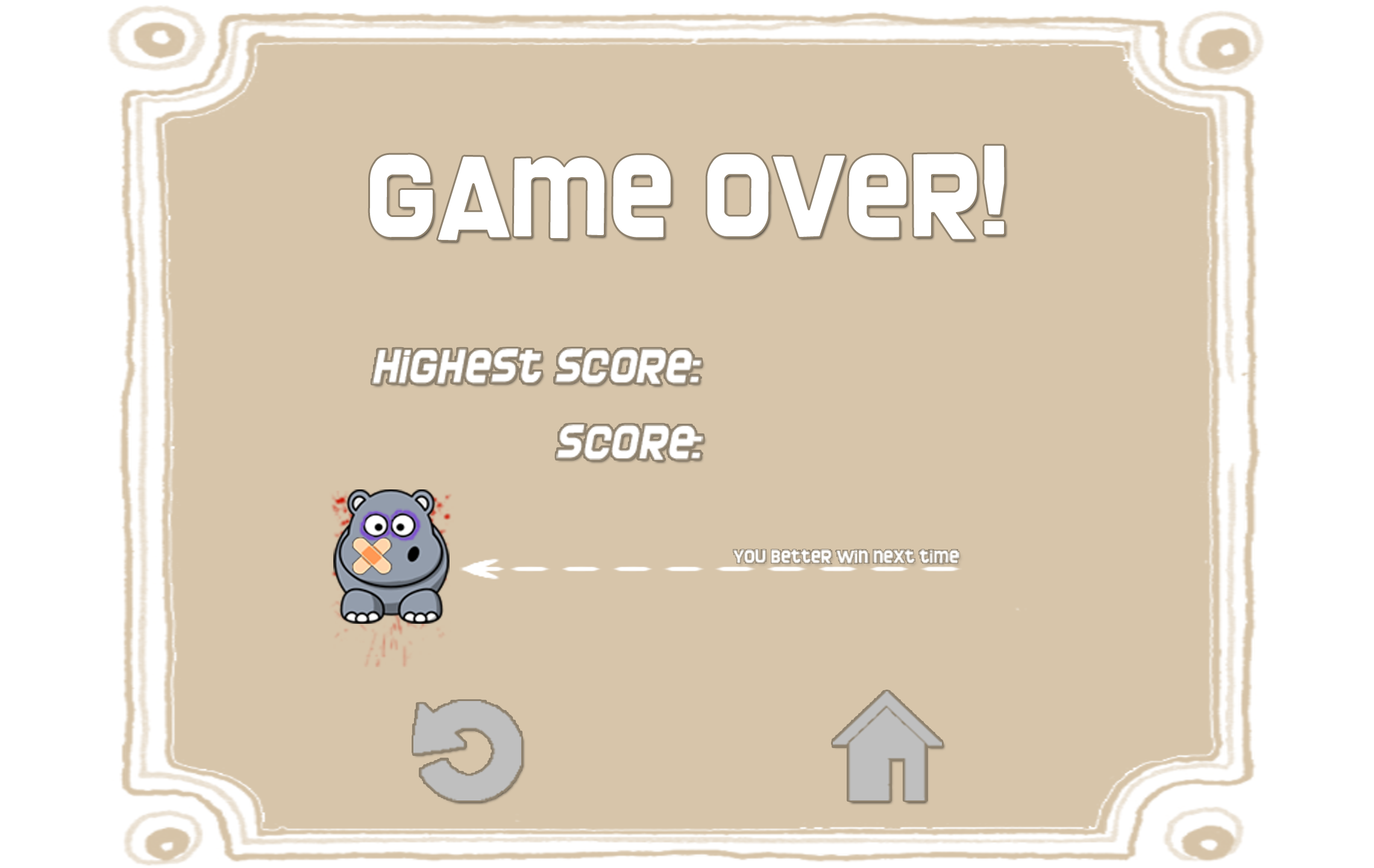
<style>
.page{position:relative;width:1374px;height:868px;background:#d7c5aa}
.page>*{position:absolute;margin:0}
.t1{font:122px "Screengem-Regular";color:#ffffff;scale:1.06 1}
.t2{font:48.8px "Screengem-Regular";color:#ffffff;font-style:italic;scale:1.06 1}
.t3{font:19px "Screengem-Regular";color:#ffffff;scale:1.06 1}
</style>
<div class="page">
<p class="t1" style="left:369px;top:145px;width:636px;height:95px">game over!</p>
<p class="t2" style="left:372px;top:348px;width:329px;height:36px">HigHest score:</p>
<p class="t2" style="left:556px;top:424px;width:147px;height:36px">score:</p>
<p class="t3" style="left:733px;top:549px;width:226px;height:15px">you better win next time</p>
</div>
